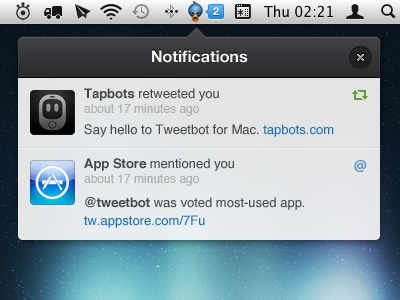
<style>
.page{position:relative;width:400px;height:300px}
.page>*{position:absolute;margin:0}
.t1{font:11px "HelveticaNeue-Bold";color:#ffffff}
.t2{font:16px "HelveticaNeue-Bold";color:#f6f5f5}
.t3{font:13px "Helvetica";color:#44484a}
.t4{font:13px "Helvetica-Bold";color:#44484a}
.t5{font:12px "Helvetica";color:#b0b0b0}
.t6{font:13px "Helvetica";color:#216db6}
.t7{font:15px "OpenSans-Bold";color:#6699cc}
.t8{font:13px/18px "Helvetica";color:#44484a}
.t9{font:13px/18px "Helvetica-Bold";color:#44484a}
.t10{font:13px/18px "Helvetica";color:#216db6}
</style>
<div class="page">
<p class="t1" style="left:213px;top:7px;width:6px;height:8px">2</p>
<p class="t2" style="left:152px;top:50px;width:96px;height:13px">Notifications</p>
<p class="t3" style="left:84px;top:88px;width:135px;height:13px"><span class="t4">Tapbots</span> retweeted you</p>
<p class="t5" style="left:84px;top:104px;width:115px;height:12px">about 17 minutes ago</p>
<p class="t3" style="left:84px;top:124px;width:250px;height:13px">Say hello to Tweetbot for Mac. <span class="t6">tapbots.com</span></p>
<p class="t3" style="left:84px;top:158px;width:150px;height:13px"><span class="t4">App Store </span>mentioned you</p>
<p class="t7" style="left:354px;top:160px;width:13px;height:12px">@</p>
<p class="t5" style="left:84px;top:174px;width:115px;height:12px">about 17 minutes ago</p>
<p class="t8" style="left:84px;top:197px;width:220px;height:31px"><span class="t9">@tweetbot</span> was voted most-used app. <br><span class="t10">tw.appstore.com/7Fu</span></p>
</div>
